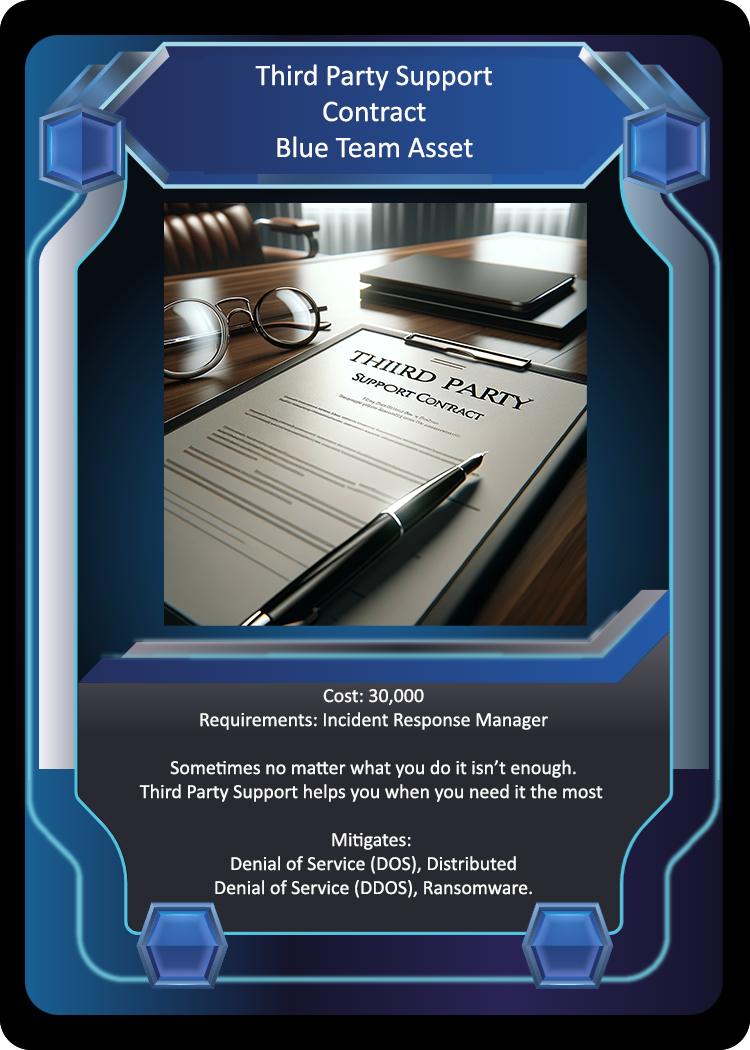
<style>
.page{position:relative;width:750px;height:1050px}
.page>*{position:absolute;margin:0}
.t1{font:30px "Calibri";color:#fcfbfb}
.t2{font:20px "Calibri";color:#fcfbfb}
</style>
<div class="page">
<p class="t1" style="left:255px;top:64px;width:237px;height:94px;text-align:center">Third Party Support<br>Contract<br>Blue Team Asset</p>
<p class="t2" style="left:139px;top:689px;width:464px;height:209px;text-align:center">Cost: 30,000<br>Requirements: Incident Response Manager<br><br>Sometimes no matter what you do it isn’t enough.<br>Third Party Support helps you when you need it the most <br><br>Mitigates: <br>Denial of Service (DOS), Distributed<br>Denial of Service (DDOS), Ransomware.</p>
</div>
